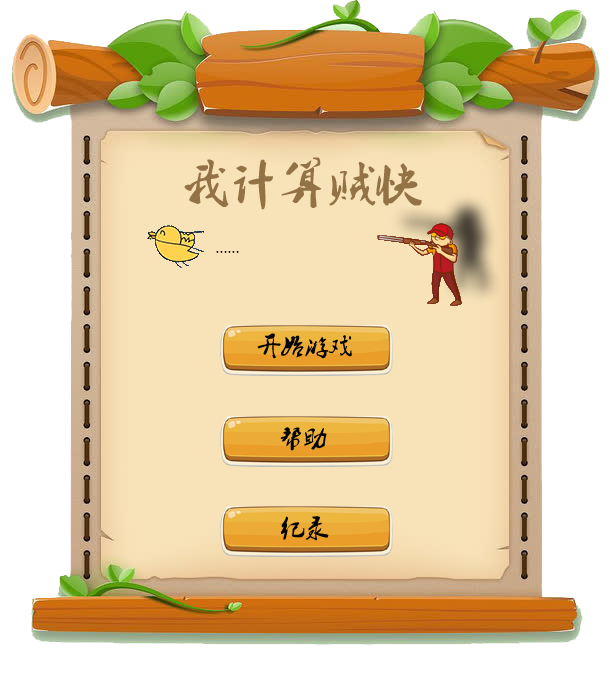
<style>
.page{position:relative;width:610px;height:673px;background:#ffffff}
.page>*{position:absolute;margin:0}
.t1{font:48px "2.0-";color:#937345}
.t2{font:12px "2.0-";color:#020202}
.t3{font:24px "2.0-";color:#020202}
</style>
<div class="page">
<p class="t1" style="left:184px;top:157px;width:238px;height:53px">我计算贼快</p>
<p class="t2" style="left:216px;top:251px;width:23px;height:2px">……</p>
<p class="t3" style="left:257px;top:333px;width:95px;height:26px">开始游戏</p>
<p class="t3" style="left:280px;top:427px;width:47px;height:24px">帮助</p>
<p class="t3" style="left:281px;top:516px;width:48px;height:25px">纪录</p>
</div>
